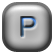
<style>
.page{position:relative;width:55px;height:55px;background:#ffffff}
.page>*{position:absolute;margin:0}
.t1{font:28px "ArialMT"}
</style>
<div class="page">
<p class="t1" style="left:21px;top:17px;width:16px;height:20px">P</p>
</div>
